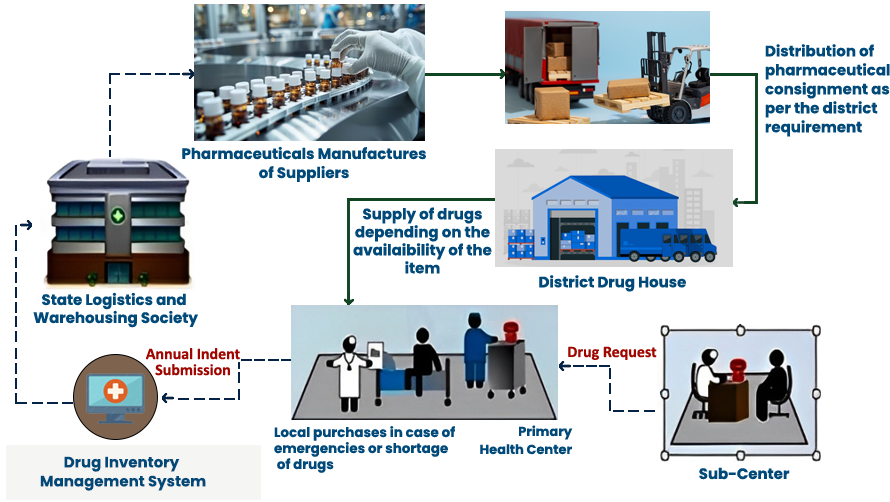
<style>
.page{position:relative;width:890px;height:502px;background:#ffffff}
.page>*{position:absolute;margin:0}
.t1{font:15px/19px "Poppins-Bold";color:#004979}
.t2{font:15px/18px "Poppins-Bold";color:#004979}
.t3{font:15px "Poppins-Bold";color:#004979}
.t4{font:16px/16px "Calibri-Bold";color:#9f0600}
.t5{font:16px "Calibri-Bold";color:#9f0600}
.t6{font:13px/18px "Poppins-Bold";color:#004979}
.t7{font:13.5px/16px "Poppins-Bold";color:#004979}
</style>
<div class="page">
<p class="t1" style="left:765px;top:44px;width:125px;height:93px">Distribution of pharmaceutical consignment as per the district requirement</p>
<p class="t1" style="left:182px;top:146px;width:244px;height:36px;text-align:center">Pharmaceuticals Manufactures<br>of Suppliers</p>
<p class="t2" style="left:353px;top:207px;width:139px;height:67px;text-align:center">Supply of drugs<br>depending on the availaibility of the item</p>
<p class="t3" style="left:539px;top:275px;width:147px;height:17px">District Drug House</p>
<p class="t2" style="left:33px;top:292px;width:165px;height:36px;text-align:center">State Logistics and<br> Warehousing Society</p>
<p class="t4" style="left:146px;top:348px;width:94px;height:28px;text-align:center">Annual Indent<br>Submission</p>
<p class="t5" style="left:568px;top:346px;width:89px;height:14px">Drug Request</p>
<p class="t6" style="left:480px;top:425px;width:93px;height:30px;text-align:right">Primary<br> Health Center</p>
<p class="t7" style="left:274px;top:426px;width:181px;height:47px">Local purchases in case of <br>emergencies or shortage<br> of drugs</p>
<p class="t1" style="left:40px;top:456px;width:166px;height:35px;text-align:center">Drug Inventory <br>Management System</p>
<p class="t3" style="left:699px;top:467px;width:91px;height:13px">Sub-Center</p>
</div>
